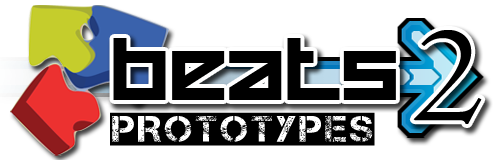
<style>
.page{position:relative;width:500px;height:160px;background:#ffffff}
.page>*{position:absolute;margin:0}
.t1{font:143.8px "Centaur";color:#000000}
.t2{font:62px "HappyKiller";color:#000000;scale:1.05 1}
.t3{font:36.9px "Captureit2";color:#000000;scale:1.09 1}
</style>
<div class="page">
<p class="t1" style="left:413px;top:30px;width:69px;height:94px">2</p>
<p class="t2" style="left:113px;top:38px;width:283px;height:62px">beats</p>
<p class="t3" style="left:110px;top:112px;width:265px;height:34px">Prototypes</p>
</div>
